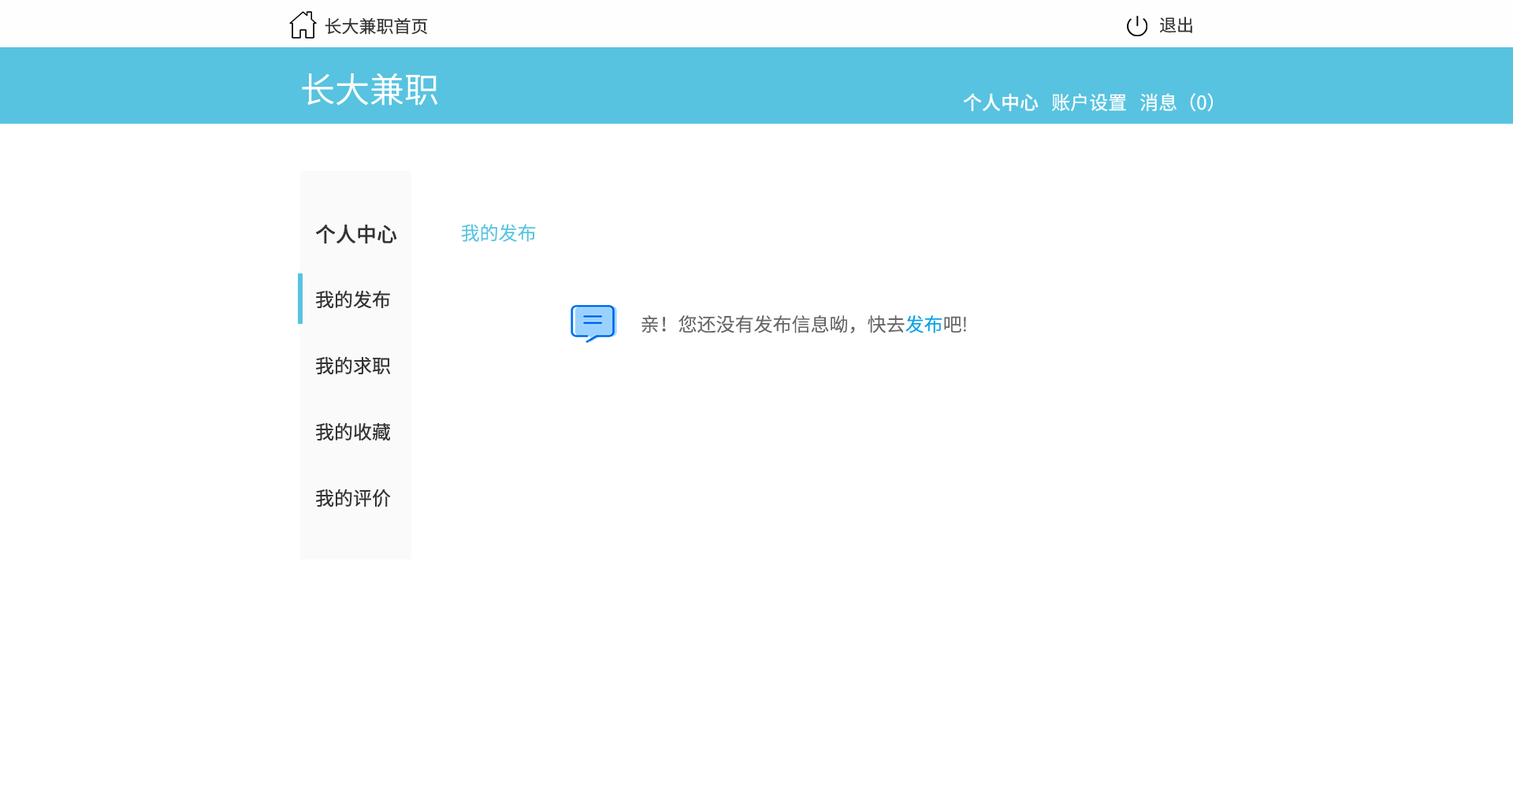
<style>
.page{position:relative;width:1513px;height:788px;background:#ffffff}
.page>*{position:absolute;margin:0}
.t1{font:17.3px "SourceHanSansCN-Normal";color:#333333}
.t2{font:34.7px "SourceHanSansCN-Normal";color:#ffffff}
.t3{font:18.9px "SourceHanSansCN-Regular";color:#ffffff}
.t4{font:18.9px "SourceHanSansCN-Medium";color:#ffffff}
.t5{font:18.9px/66.2px "SourceHanSansCN-Regular";color:#333333}
.t6{font:20.5px/66.2px "SourceHanSansCN-Medium";color:#333333}
.t7{font:18.9px "SourceHanSansCN-Normal";color:#57c3e0}
.t8{font:18.9px "SourceHanSansCN-Normal";color:#666666}
.t9{font:18.9px "SourceHanSansCN-Normal";color:#0ba1e4}
</style>
<div class="page">
<p class="t1" style="left:1160px;top:17px;width:32px;height:16px">退出</p>
<p class="t1" style="left:325px;top:18px;width:102px;height:17px">长大兼职首页</p>
<p class="t2" style="left:302px;top:73px;width:135px;height:33px">长大兼职</p>
<p class="t3" style="left:963px;top:93px;width:250px;height:19px"><span class="t4">个人中心</span>   账户设置   消息（0）</p>
<p class="t5" style="left:315px;top:225px;width:82px;height:283px"><span class="t6">个人中心<br></span>我的发布<br>我的求职<br>我的收藏<br>我的评价</p>
<p class="t7" style="left:461px;top:224px;width:75px;height:18px">我的发布</p>
<p class="t8" style="left:641px;top:315px;width:325px;height:18px">亲！您还没有发布信息呦，快去<span class="t9">发布</span>吧!</p>
</div>
